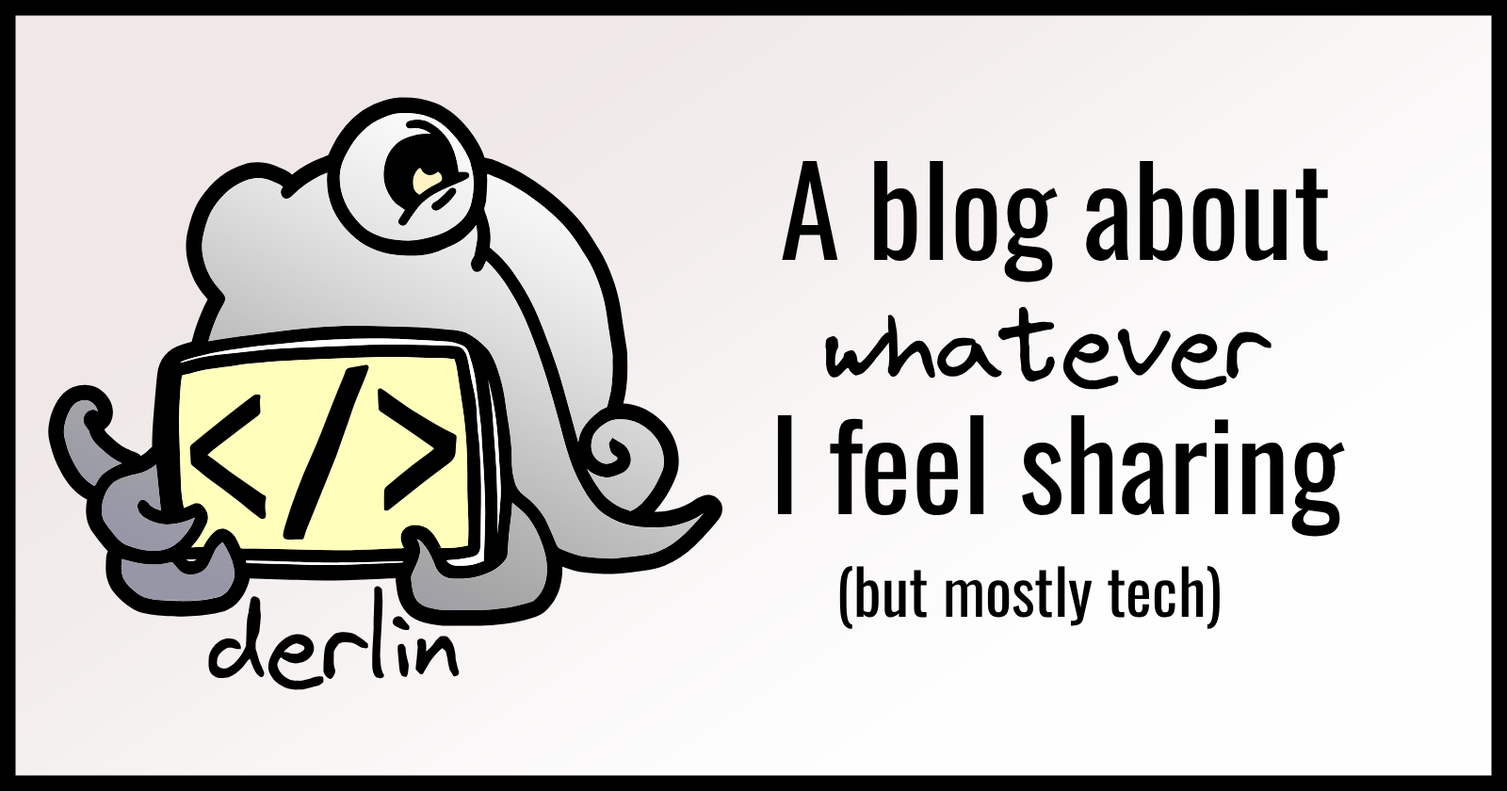
<style>
.page{position:relative;width:1507px;height:791px}
.page>*{position:absolute;margin:0}
.t1{font:122px "Oswald-Regular";color:#000000}
.t2{font:101.5px "Virgil3YOFF";color:#000000}
.t3{font:62.3px "Oswald-Regular";color:#000000}
.t4{font:101.7px "Virgil3YOFF";color:#000000}
</style>
<div class="page">
<p class="t1" style="left:782px;top:161px;width:546px;height:122px">A blog about</p>
<p class="t2" style="left:825px;top:306px;width:448px;height:84px">whatever</p>
<p class="t1" style="left:777px;top:415px;width:568px;height:122px">I feel sharing</p>
<p class="t3" style="left:839px;top:566px;width:381px;height:63px">(but mostly tech)</p>
<p class="t4" style="left:208px;top:586px;width:252px;height:104px">derlin</p>
</div>
